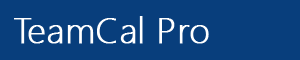
<style>
.page{position:relative;width:300px;height:60px;background:#083e7c}
.page>*{position:absolute;margin:0}
.t1{font:36px "SegoeUI-Light";color:#ffffff;font-weight:bold}
</style>
<div class="page">
<p class="t1" style="left:14px;top:16px;width:195px;height:28px">TeamCal Pro</p>
</div>
